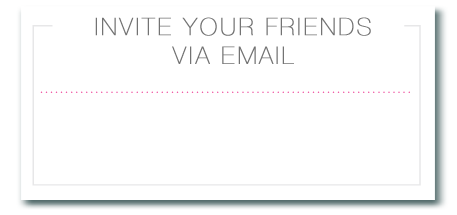
<style>
.page{position:relative;width:457px;height:215px;background:#ffffff}
.page>*{position:absolute;margin:0}
.t1{font:24px "HelveticaNeue-UltraLight";letter-spacing:0.1em;color:#737373;font-weight:bold}
</style>
<div class="page">
<p class="t1" style="left:95px;top:17px;width:276px;height:47px;text-align:center">INVITE YOUR FRIENDS<br>VIA EMAIL</p>
</div>
